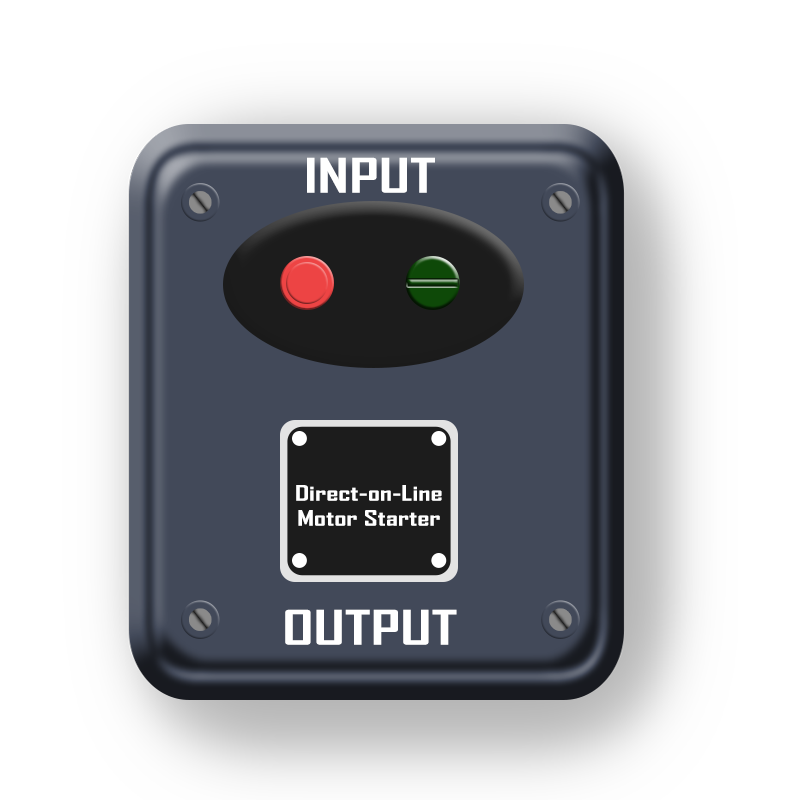
<style>
.page{position:relative;width:800px;height:800px;background:#ffffff}
.page>*{position:absolute;margin:0}
.t1{font:45.8px "AgencyFB-Bold";color:#ffffff;scale:1.44 1}
.t2{font:20.8px "AgencyFB-Bold";color:#ffffff;scale:1.44 1}
</style>
<div class="page">
<p class="t1" style="left:307px;top:157px;width:128px;height:36px">INPUT</p>
<p class="t2" style="left:296px;top:485px;width:146px;height:41px;text-align:center">Direct-on-Line<br>Motor Starter</p>
<p class="t1" style="left:285px;top:609px;width:172px;height:36px">OUTPUT</p>
</div>
